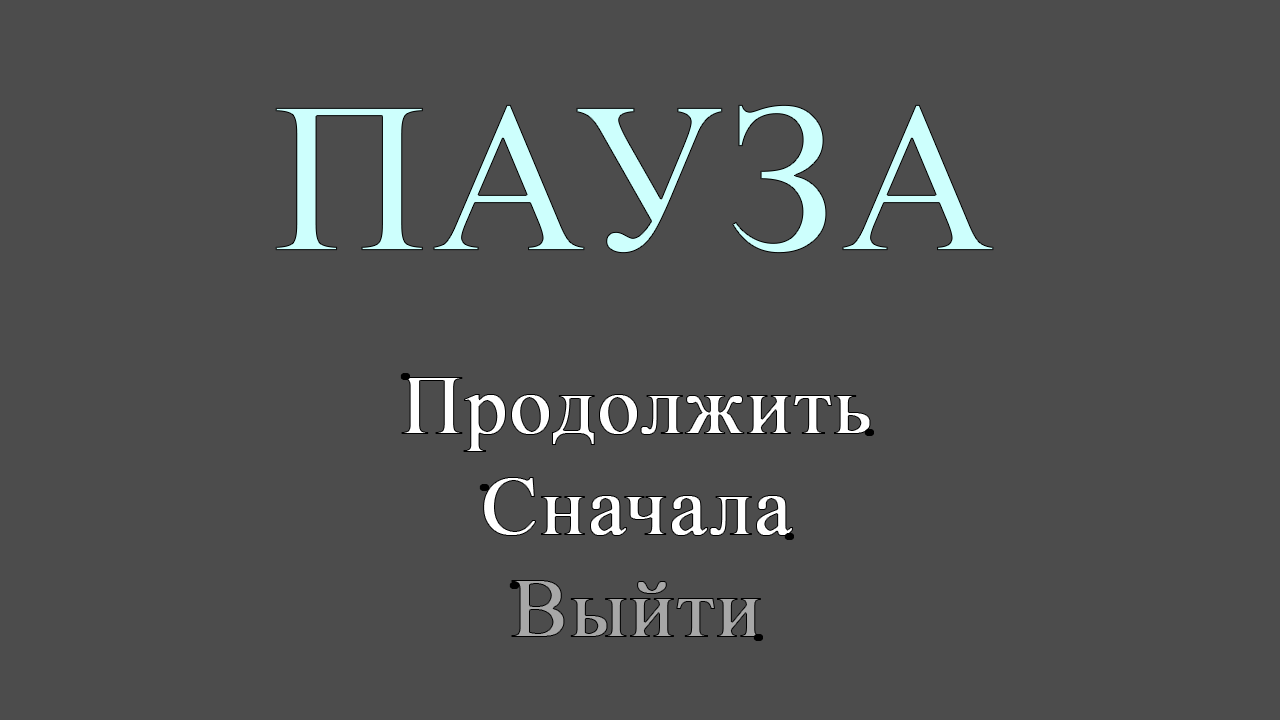
<style>
.page{position:relative;width:1280px;height:720px;background:#4c4c4c}
.page>*{position:absolute;margin:0}
.t1{font:213.8px "TimesNewRomanPSMT";color:#cdfffd;font-weight:bold}
.t2{font:67.9px "TimesNewRomanPSMT";color:#000000;font-weight:bold}
.t3{font:84.8px "TimesNewRomanPSMT";color:#ffffff;font-weight:bold}
.t4{font:84.8px "TimesNewRomanPSMT";color:#a7a7a7;font-weight:bold}
</style>
<div class="page">
<p class="t1" style="left:275px;top:104px;width:719px;height:150px">ПАУЗА</p>
<p class="t2" style="left:400px;top:373px;width:10px;height:7px">.</p>
<p class="t3" style="left:401px;top:377px;width:470px;height:260px;text-align:center">Продолжить<br>Сначала<br><span class="t4">Выйти</span></p>
<p class="t2" style="left:864px;top:429px;width:10px;height:7px">.</p>
<p class="t2" style="left:479px;top:484px;width:10px;height:7px">.</p>
<p class="t2" style="left:784px;top:533px;width:10px;height:7px">.</p>
<p class="t2" style="left:509px;top:582px;width:10px;height:7px">.</p>
<p class="t2" style="left:753px;top:634px;width:10px;height:7px">.</p>
</div>
